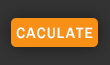
<style>
.page{position:relative;width:110px;height:65px;background:#f89016}
.page>*{position:absolute;margin:0}
.t1{font:15.3px "FranklinGothic-Medium";letter-spacing:0.075em;color:#ffffff}
</style>
<div class="page">
<p class="t1" style="left:16px;top:27px;width:77px;height:12px">CACULATE</p>
</div>
